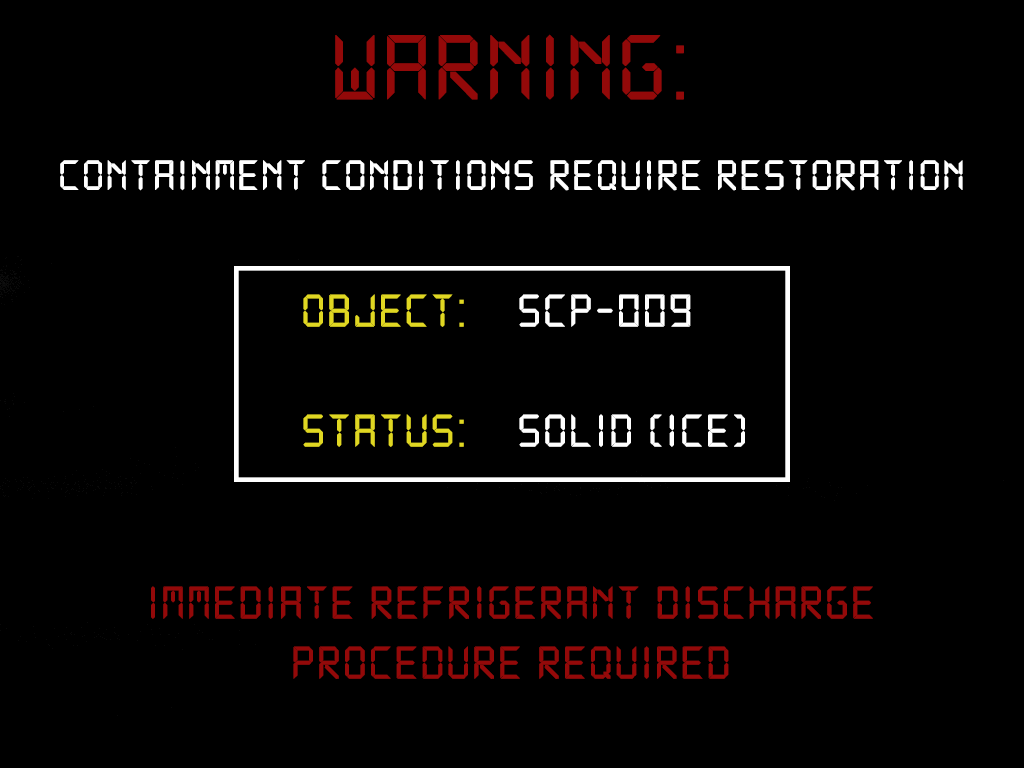
<style>
.page{position:relative;width:1024px;height:768px;background:#000000}
.page>*{position:absolute;margin:0}
.t1{font:100px "DS-Digital";color:#930909;font-weight:bold}
.t2{font:45.8px "DS-Digital";color:#ffffff;font-weight:bold}
.t3{font:12px "DS-Digital";color:#ffffff;font-weight:bold}
.t4{font:12px "DS-Digital";color:#e0d722;font-weight:bold}
.t5{font:12px "DS-Digital";color:#930909;font-weight:bold}
</style>
<div class="page">
<p class="t1" style="left:335px;top:34px;width:349px;height:66px">WARNING:</p>
<p class="t2" style="left:60px;top:160px;width:903px;height:31px">Containment conditions require restoration</p>
<p class="t3" style="left:303px;top:294px;width:442px;height:153px"><span class="t4">Object:</span>  SCP-009<br><br><span class="t4">Status:</span>  Solid (ice)</p>
<p class="t5" style="left:151px;top:586px;width:722px;height:93px;text-align:center">Immediate refrigerant discharge procedure Required</p>
</div>
